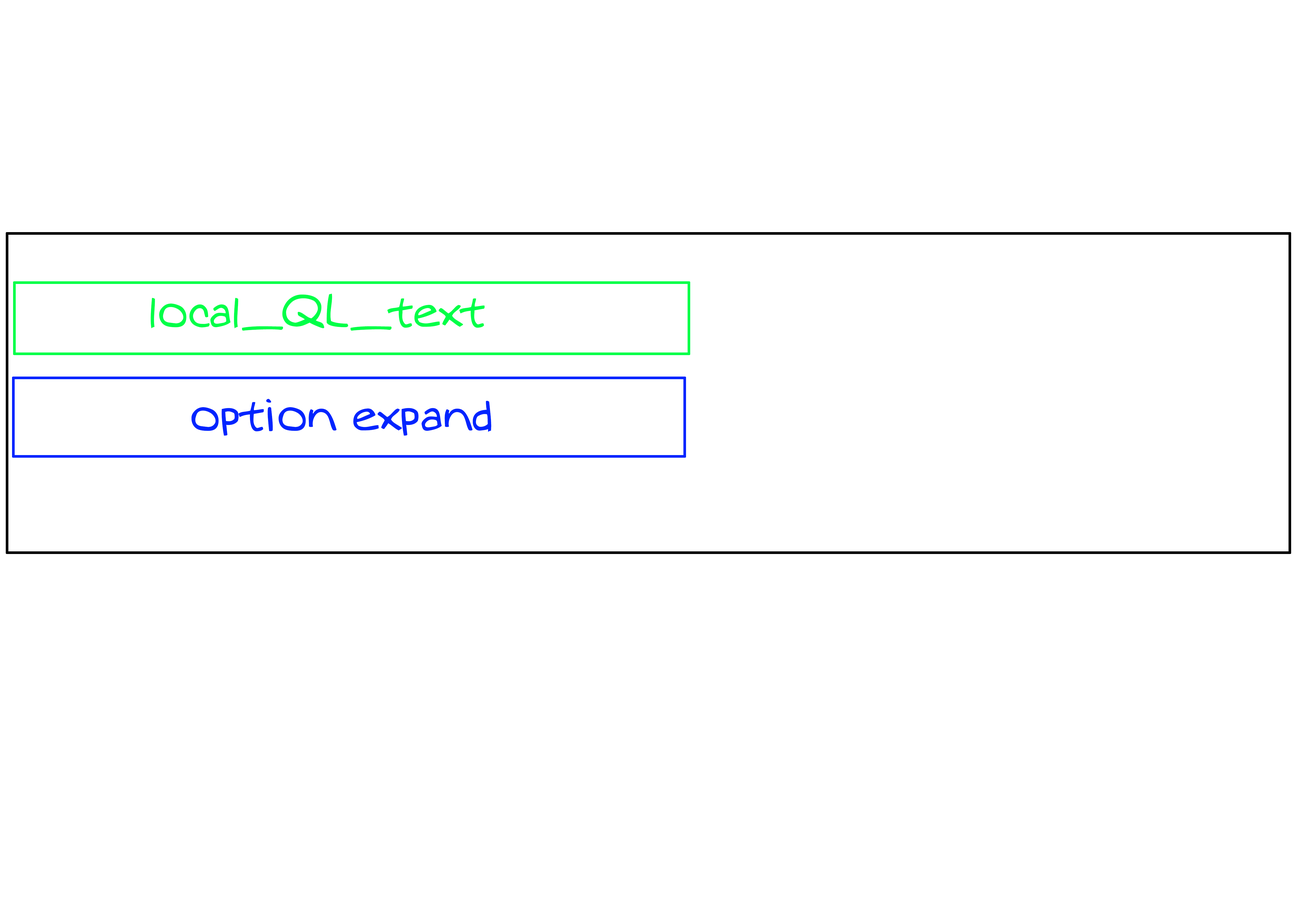
<style>
.page{position:relative;width:1299px;height:918px;background:#ffffff}
.page>*{position:absolute;margin:0}
.t1{font:43.6px "MTOaugie-Regular";color:#00ff48}
.t2{font:43.6px "MTOaugie-Regular";color:#0024ff}
</style>
<div class="page">
<p class="t1" style="left:151px;top:294px;width:334px;height:37px">local_QL_text</p>
<p class="t2" style="left:191px;top:399px;width:300px;height:37px">option expand</p>
</div>
